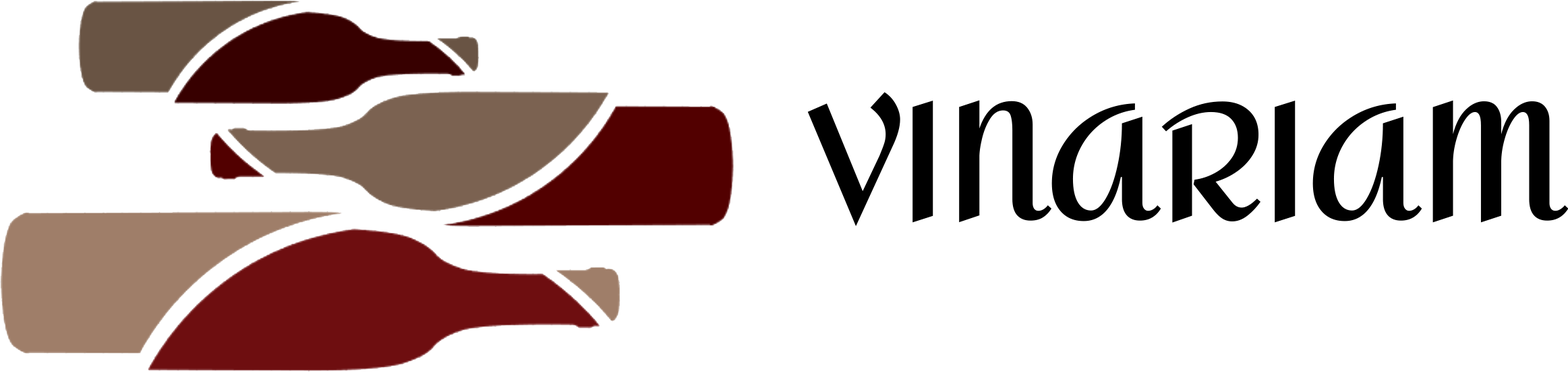
<style>
.page{position:relative;width:1568px;height:372px;background:#ffffff}
.page>*{position:absolute;margin:0}
.t1{font:161.8px "Amita-Bold";color:#000000}
</style>
<div class="page">
<p class="t1" style="left:807px;top:92px;width:762px;height:134px">VINARIAM</p>
</div>
